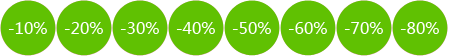
<style>
.page{position:relative;width:452px;height:56px;background:#60c102}
.page>*{position:absolute;margin:0}
.t1{font:16px "MicrosoftYaHei";color:#ffffff}
</style>
<div class="page">
<p class="t1" style="left:8px;top:22px;width:39px;height:12px">-10%</p>
<p class="t1" style="left:64px;top:22px;width:39px;height:12px">-20%</p>
<p class="t1" style="left:120px;top:22px;width:39px;height:12px">-30%</p>
<p class="t1" style="left:176px;top:22px;width:39px;height:12px">-40%</p>
<p class="t1" style="left:232px;top:22px;width:39px;height:12px">-50%</p>
<p class="t1" style="left:288px;top:22px;width:39px;height:12px">-60%</p>
<p class="t1" style="left:344px;top:22px;width:39px;height:12px">-70%</p>
<p class="t1" style="left:400px;top:22px;width:39px;height:12px">-80%</p>
</div>
